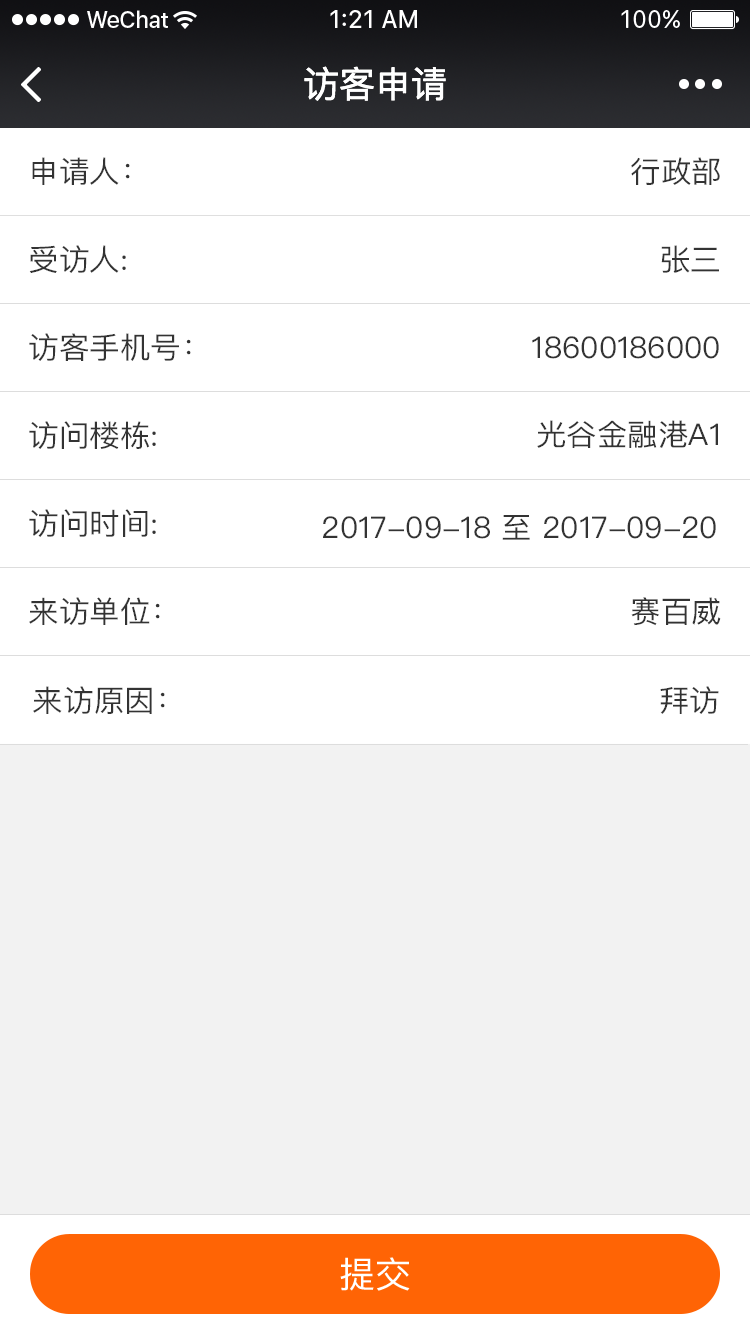
<style>
.page{position:relative;width:750px;height:1334px;background:#ffffff}
.page>*{position:absolute;margin:0}
.t1{font:36px "PingFangSC-Regular";color:#ffffff}
.t2{font:30px "PingFangSC-Regular";color:#333333}
.t3{font:36px "PingFang-SC-Medium";color:#ffffff}
</style>
<div class="page">
<p class="t1" style="left:304px;top:66px;width:142px;height:35px">访客申请</p>
<p class="t2" style="left:32px;top:157px;width:98px;height:28px">申请人：</p>
<p class="t2" style="left:631px;top:157px;width:89px;height:28px">行政部</p>
<p class="t2" style="left:29px;top:245px;width:97px;height:28px">受访人:</p>
<p class="t2" style="left:661px;top:245px;width:58px;height:28px">张三</p>
<p class="t2" style="left:29px;top:333px;width:162px;height:28px">访客手机号：</p>
<p class="t2" style="left:532px;top:336px;width:187px;height:23px">18600186000</p>
<p class="t2" style="left:29px;top:421px;width:127px;height:28px">访问楼栋:</p>
<p class="t2" style="left:537px;top:420px;width:181px;height:28px">光谷金融港A1</p>
<p class="t2" style="left:29px;top:509px;width:127px;height:28px">访问时间:</p>
<p class="t2" style="left:323px;top:515px;width:393px;height:25px">2017-09-18 至 2017-09-20</p>
<p class="t2" style="left:29px;top:597px;width:131px;height:28px">来访单位：</p>
<p class="t2" style="left:631px;top:597px;width:90px;height:29px">赛百威</p>
<p class="t2" style="left:33px;top:686px;width:132px;height:28px">来访原因：</p>
<p class="t2" style="left:660px;top:686px;width:59px;height:28px">拜访</p>
<p class="t3" style="left:340px;top:1257px;width:70px;height:34px">提交</p>
</div>
